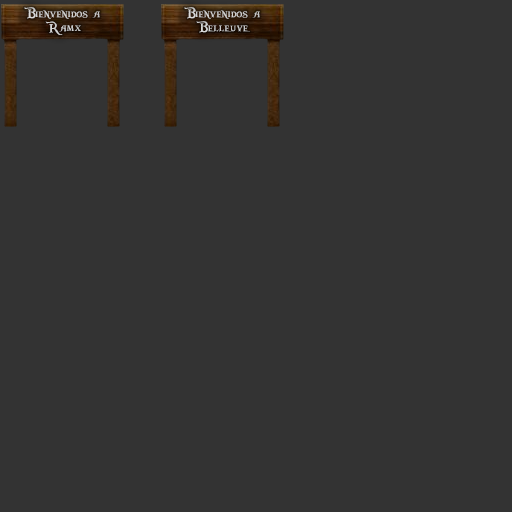
<style>
.page{position:relative;width:512px;height:512px;background:#333333}
.page>*{position:absolute;margin:0}
.t1{font:16px/14px "PiecesofEight";color:#d1d1d1}
</style>
<div class="page">
<p class="t1" style="left:24px;top:7px;width:76px;height:28px;text-align:center">Bienvenidos a<br>Ramx</p>
<p class="t1" style="left:184px;top:7px;width:76px;height:26px;text-align:center">Bienvenidos a<br>Belleuve</p>
</div>
